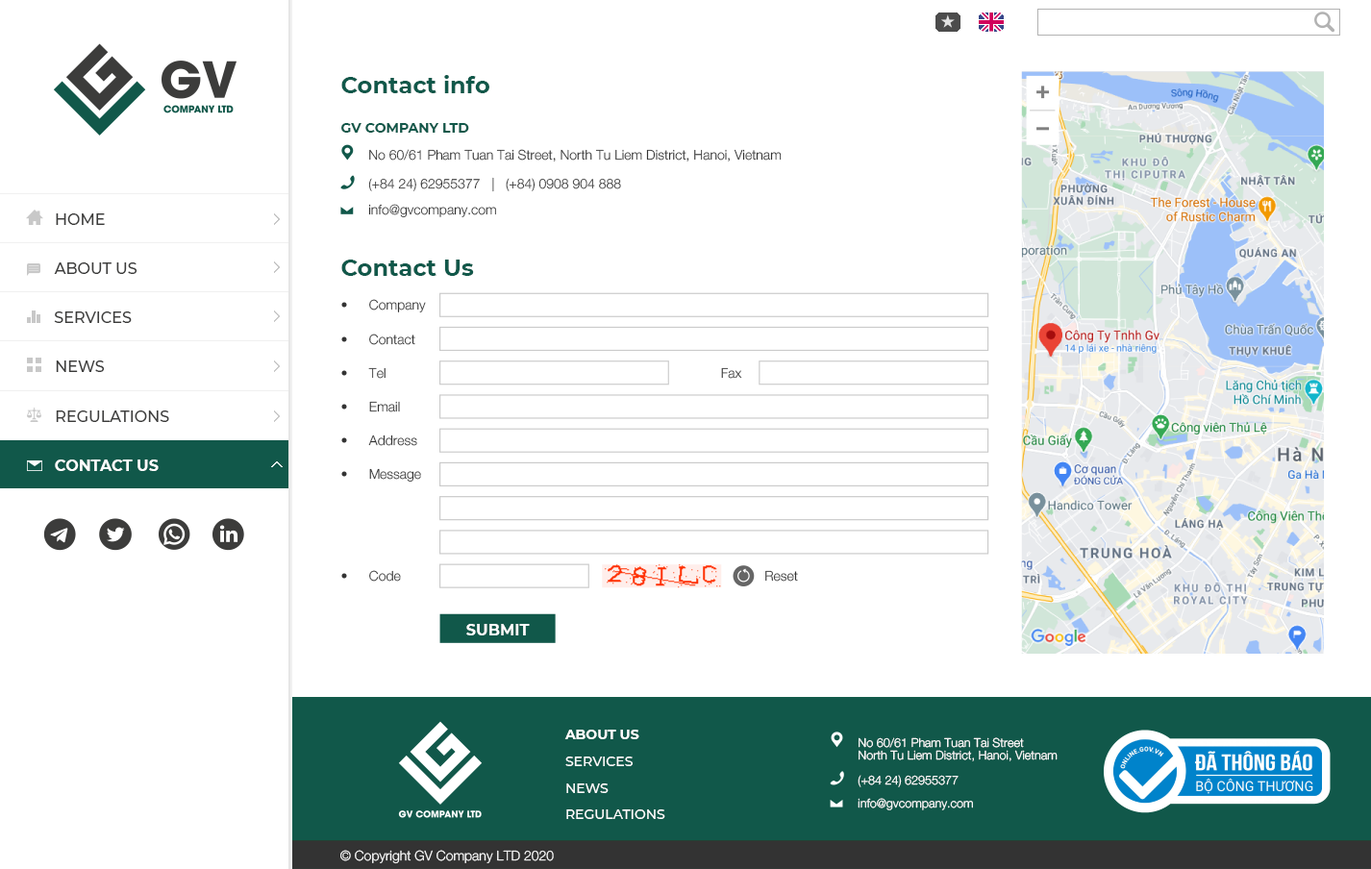
<style>
.page{position:relative;width:1371px;height:869px;background:#ffffff}
.page>*{position:absolute;margin:0}
.t1{font:23.1px "Montserrat-Bold";color:#11584a}
.t2{font:13.5px "Montserrat-Bold";color:#11584a}
.t3{font:13.5px "Oxydesign-HE45-Light";color:#333333}
.t4{font:15.4px "Montserrat-Medium";color:#3c3c3b}
.t5{font:13.5px "Oxydesign-HE45-Light"}
.t6{font:15.4px "Montserrat-Bold";color:#ffffff}
.t7{font:13.5px "Montserrat-Bold";color:#ffffff}
.t8{font:12.1px/13.2px "Oxydesign-HE45-Light";color:#ffffff}
.t9{font:13.5px "Montserrat-Medium";color:#ffffff}
.t10{font:12.1px "Oxydesign-HE45-Light";color:#ffffff}
.t11{font:13.5px "Oxydesign-HE45-Light";color:#ffffff}
</style>
<div class="page">
<p class="t1" style="left:341px;top:75px;width:149px;height:18px">Contact info</p>
<p class="t2" style="left:341px;top:123px;width:128px;height:10px">GV COMPANY LTD</p>
<p class="t3" style="left:369px;top:149px;width:413px;height:13px">No 60/61 Pham Tuan Tai Street, North Tu Liem District, Hanoi, Vietnam</p>
<p class="t3" style="left:368px;top:177px;width:253px;height:15px">(+84 24) 62955377   |   (+84) 0908 904 888</p>
<p class="t3" style="left:368px;top:204px;width:128px;height:14px">info@gvcompany.com</p>
<p class="t4" style="left:56px;top:214px;width:49px;height:11px">HOME</p>
<p class="t4" style="left:54px;top:263px;width:84px;height:11px">ABOUT US</p>
<p class="t1" style="left:341px;top:260px;width:133px;height:16px">Contact Us</p>
<p class="t3" style="left:341px;top:299px;width:85px;height:14px">• Company</p>
<p class="t4" style="left:54px;top:312px;width:78px;height:11px">SERVICES</p>
<p class="t3" style="left:341px;top:334px;width:74px;height:11px">• Contact</p>
<p class="t4" style="left:56px;top:361px;width:49px;height:11px">NEWS</p>
<p class="t3" style="left:341px;top:367px;width:45px;height:12px">• Tel</p>
<p class="t5" style="left:721px;top:367px;width:21px;height:12px">Fax</p>
<p class="t3" style="left:341px;top:401px;width:59px;height:12px">• Email</p>
<p class="t4" style="left:56px;top:411px;width:113px;height:11px">REGULATIONS</p>
<p class="t3" style="left:341px;top:435px;width:76px;height:11px">• Address</p>
<p class="t6" style="left:55px;top:460px;width:104px;height:11px">CONTACT US</p>
<p class="t3" style="left:341px;top:468px;width:80px;height:15px">• Message</p>
<p class="t3" style="left:341px;top:570px;width:60px;height:12px">• Code</p>
<p class="t3" style="left:766px;top:570px;width:32px;height:12px">Reset</p>
<p class="t6" style="left:466px;top:624px;width:64px;height:12px">SUBMIT</p>
<p class="t7" style="left:565px;top:730px;width:75px;height:10px">ABOUT US</p>
<p class="t8" style="left:859px;top:738px;width:199px;height:24px">No 60/61 Pham Tuan Tai Street<br>North Tu Liem District, Hanoi, Vietnam</p>
<p class="t9" style="left:566px;top:757px;width:67px;height:10px">SERVICES</p>
<p class="t9" style="left:566px;top:784px;width:43px;height:9px">NEWS</p>
<p class="t10" style="left:858px;top:775px;width:101px;height:13px">(+84 24) 62955377</p>
<p class="t9" style="left:566px;top:810px;width:100px;height:9px">REGULATIONS</p>
<p class="t10" style="left:858px;top:798px;width:115px;height:13px">info@gvcompany.com</p>
<p class="t11" style="left:340px;top:850px;width:214px;height:15px">© Copyright GV Company LTD 2020</p>
</div>
